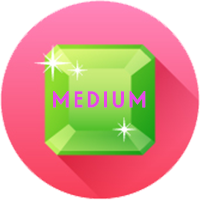
<style>
.page{position:relative;width:200px;height:200px;background:#ffffff}
.page>*{position:absolute;margin:0}
.t1{font:21.6px "Landmark-Inline";letter-spacing:0.1em;color:#e647e8;font-weight:bold}
</style>
<div class="page">
<p class="t1" style="left:53px;top:91px;width:93px;height:17px">MEDIUM</p>
</div>
